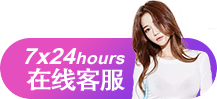
<style>
.page{position:relative;width:217px;height:99px;background:#ffffff}
.page>*{position:absolute;margin:0}
.t1{font:16.7px "ArialNarrow-Bold";color:#ffffff;font-style:italic;scale:1.3 1}
.t2{font:22.3px "ArialNarrow-Bold";color:#ffffff;font-style:italic;scale:1.3 1}
.t3{font:24.6px "STHeitiTC-Medium";letter-spacing:-0.085em;color:#ffffff;font-weight:bold;scale:1.07 1}
</style>
<div class="page">
<p class="t1" style="left:25px;top:48px;width:100px;height:17px"><span class="t2">7x24</span>hours</p>
<p class="t3" style="left:26px;top:68px;width:99px;height:23px">在线客服</p>
</div>
